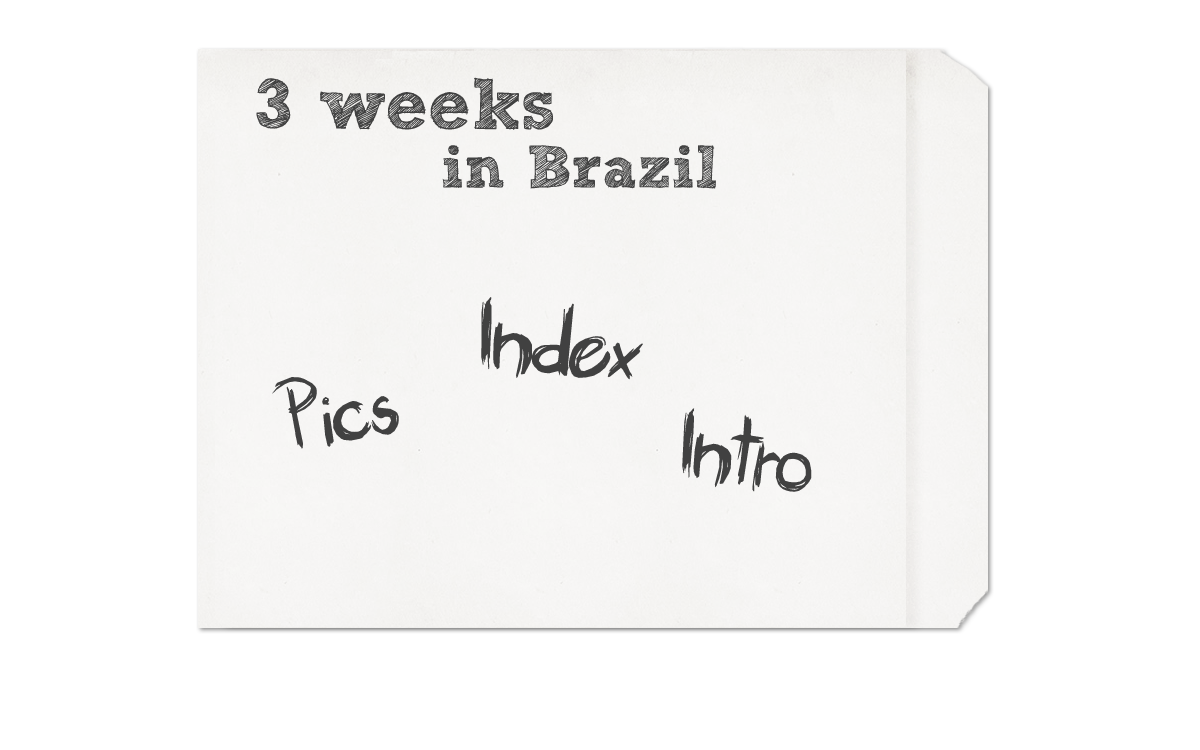
<style>
.page{position:relative;width:1200px;height:750px;background:#ffffff}
.page>*{position:absolute;margin:0}
.t1{font:72px "SketchRockwell";color:#414141}
.t2{font:60px "SketchRockwell";color:#424242}
.t3{font:83px "Brankovic";color:#414141}
.t4{font:80px "Brankovic";color:#414141}
</style>
<div class="page">
<p class="t1" style="left:256px;top:77px;width:297px;height:53px">3 weeks</p>
<p class="t2" style="left:442px;top:145px;width:274px;height:44px">in Brazil</p>
<p class="t3" style="left:481px;top:297px;width:162px;height:83px;rotate:5deg">Index</p>
<p class="t4" style="left:272px;top:377px;width:127px;height:72px;rotate:-9deg">Pics</p>
<p class="t4" style="left:682px;top:408px;width:130px;height:84px;rotate:8deg">Intro</p>
</div>
